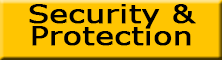
<style>
.page{position:relative;width:222px;height:60px;background:#ffc501}
.page>*{position:absolute;margin:0}
.t1{font:24.5px/22px "Verdana";color:#000000;font-weight:bold;scale:1.25 1}
</style>
<div class="page">
<p class="t1" style="left:29px;top:4px;width:167px;height:42px;text-align:center">Security &amp; Protection</p>
</div>
